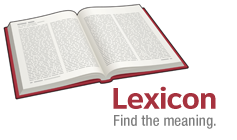
<style>
.page{position:relative;width:237px;height:140px;background:#ffffff}
.page>*{position:absolute;margin:0}
.t1{font:31px "ClearviewSelf-Bold";letter-spacing:-0.05em;color:#a6323e}
.t2{font:15px "HelveticaNeue-MediumCond";color:#7d7d7d}
</style>
<div class="page">
<p class="t1" style="left:113px;top:86px;width:103px;height:23px">Lexicon</p>
<p class="t2" style="left:114px;top:114px;width:102px;height:15px">Find the meaning.</p>
</div>
